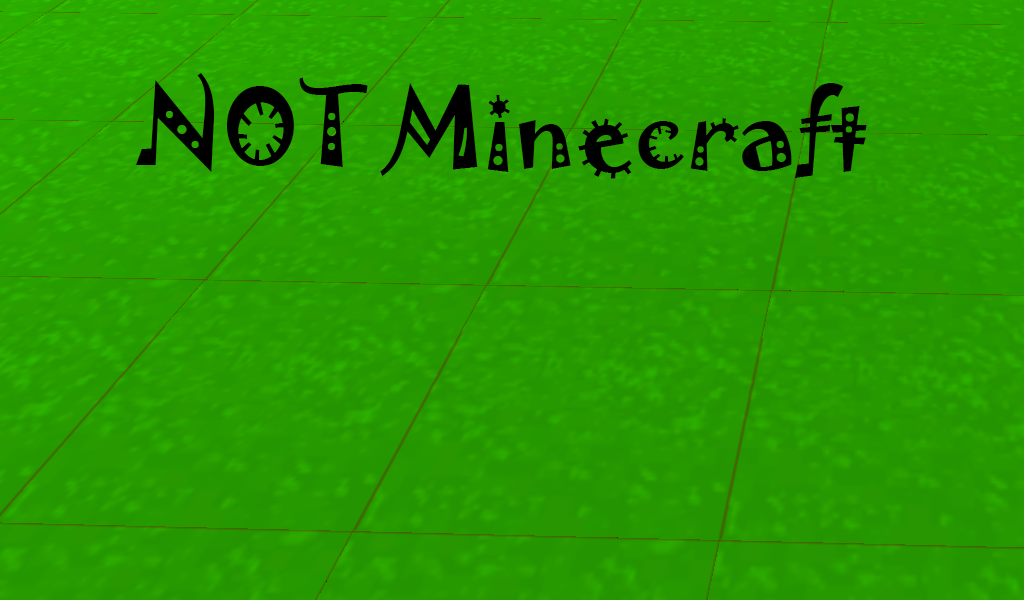
<style>
.page{position:relative;width:1024px;height:600px}
.page>*{position:absolute;margin:0}
.t1{font:100px "Jokerman-Regular";color:#000000}
</style>
<div class="page">
<p class="t1" style="left:136px;top:73px;width:731px;height:106px">NOT Minecraft</p>
</div>
